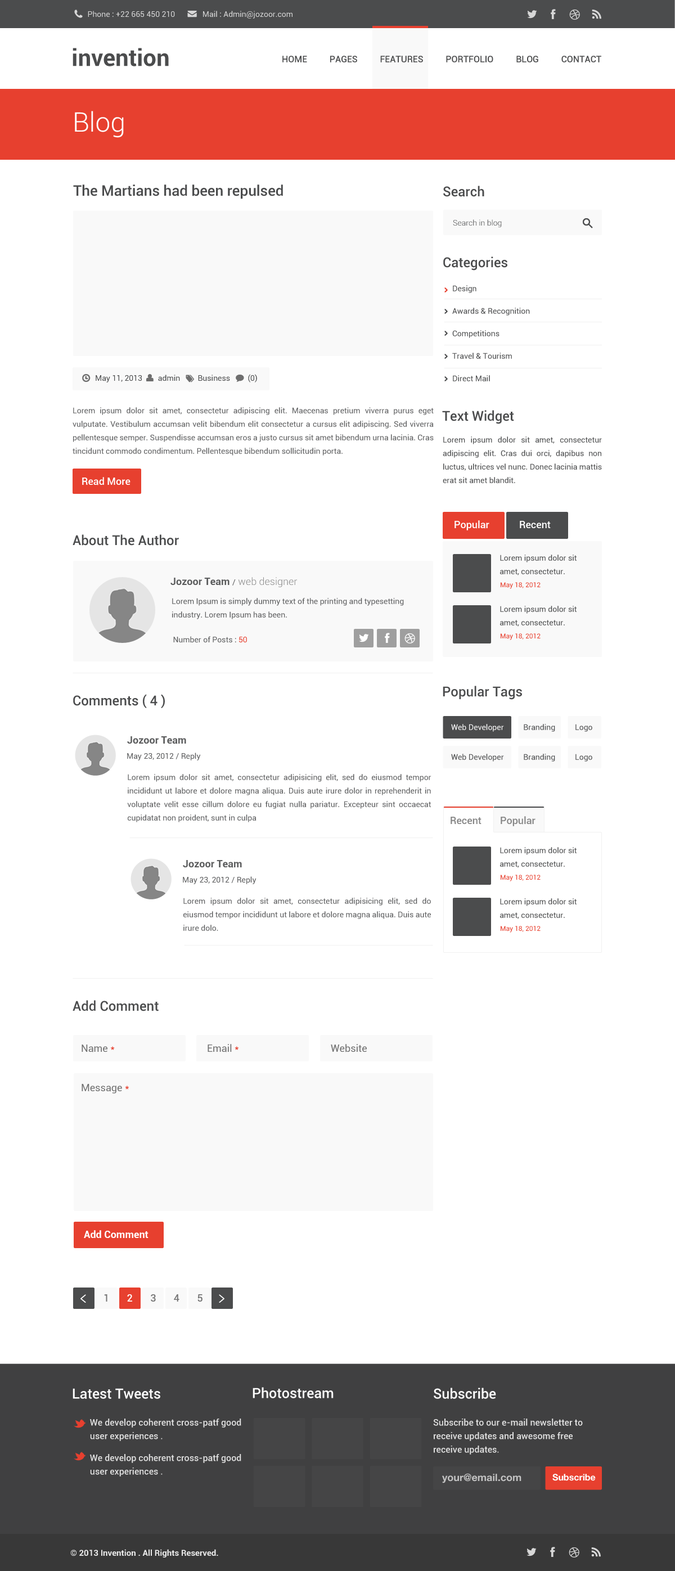
<style>
.page{position:relative;width:675px;height:1571px;background:#ffffff}
.page>*{position:absolute;margin:0}
.t1{font:7.9px "Roboto-Regular";color:#d7d7d7}
.t2{font:9px "Roboto-Medium";color:#4b4c4d}
.t3{font:27px "Roboto-Light";color:#ffffff}
.t4{font:14.6px "Roboto-Medium";color:#4b4c4d}
.t5{font:13.5px "Roboto-Medium";color:#4b4c4d}
.t6{font:7.9px "Roboto-Light";color:#4b4c4d}
.t7{font:7.9px/22.5px "Roboto-Regular";color:#4b4c4d}
.t8{font:7.9px "Roboto-Regular";color:#4b4c4d}
.t9{font:7.9px/13.5px "Roboto-Regular";color:#5c5d5e}
.t10{font:7.9px/13.5px "Roboto-Regular";color:#4b4c4d}
.t11{font:10.1px "Roboto-Medium";color:#ffffff}
.t12{font:10.1px "Roboto-Light";color:#8a8a8a}
.t13{font:10.1px "Roboto-Bold";color:#5c5d5e}
.t14{font:7.9px "Roboto-Regular";color:#5c5d5e}
.t15{font:6.8px "Roboto-Regular";color:#e7402f}
.t16{font:7.9px "Roboto-Regular";color:#e7402f}
.t17{font:10.1px "Roboto-Medium";color:#868686}
.t18{font:10.1px "Roboto-Medium";color:#878787}
.t19{font:10.1px "Roboto-Regular";color:#717171}
.t20{font:10.1px "Roboto-Regular";color:#e7402f}
.t21{font:10.1px "Roboto-Bold";color:#ffffff}
.t22{font:10.1px "Roboto-Medium";color:#757575}
.t23{font:9px/13.5px "Roboto-Medium";color:#e1e1e1}
.t24{font:14.1px/16.1px "Roboto-Medium";color:#ffffff}
.t25{font:14.1px "Roboto-Medium";color:#ffffff}
.t26{font:10.1px "HelveticaNeue-Bold";color:#c2c2c2}
.t27{font:9px "HelveticaNeue-Bold";color:#ffffff}
.t28{font:8.4px "Roboto-Bold";color:#eaeaea}
</style>
<div class="page">
<p class="t1" style="left:88px;top:11px;width:204px;height:8px">Phone : +22 665 450 210              Mail : Admin@jozoor.com</p>
<p class="t2" style="left:282px;top:56px;width:319px;height:6px">HOME          PAGES          FEATURES          PORTFOLIO          BLOG          CONTACT</p>
<p class="t3" style="left:75px;top:111px;width:49px;height:27px">Blog</p>
<p class="t4" style="left:73px;top:184px;width:210px;height:15px">The Martians had been repulsed</p>
<p class="t5" style="left:443px;top:186px;width:41px;height:11px">Search</p>
<p class="t6" style="left:453px;top:219px;width:49px;height:8px">Search in blog</p>
<p class="t5" style="left:443px;top:256px;width:64px;height:15px">Categories</p>
<p class="t7" style="left:452px;top:285px;width:78px;height:96px">Design<br>Awards &amp; Recognition<br>Competitions<br>Travel &amp; Tourism<br>Direct Mail</p>
<p class="t8" style="left:96px;top:374px;width:161px;height:8px">May 11, 2013        admin         Business         (0)</p>
<p class="t9" style="left:73px;top:407px;width:361px;height:49px;text-align:justify">Lorem ipsum dolor sit amet, consectetur adipiscing elit. Maecenas pretium viverra purus eget vulputate. Vestibulum accumsan velit bibendum elit consectetur a cursus elit adipiscing. Sed viverra pellentesque semper. Suspendisse accumsan eros a justo cursus sit amet bibendum urna lacinia. Cras tincidunt commodo condimentum. Pellentesque bibendum sollicitudin porta.</p>
<p class="t5" style="left:442px;top:410px;width:72px;height:14px">Text Widget</p>
<p class="t10" style="left:443px;top:436px;width:159px;height:47px;text-align:justify">Lorem ipsum dolor sit amet, consectetur adipiscing elit. Cras dui orci, dapibus non luctus, ultrices vel nunc. Donec lacinia mattis erat sit amet blandit.</p>
<p class="t11" style="left:82px;top:477px;width:48px;height:8px">Read More</p>
<p class="t11" style="left:454px;top:520px;width:35px;height:10px">Popular</p>
<p class="t11" style="left:520px;top:521px;width:31px;height:7px">Recent</p>
<p class="t5" style="left:73px;top:534px;width:106px;height:12px">About The Author</p>
<p class="t10" style="left:500px;top:555px;width:77px;height:20px">Lorem ipsum dolor sit amet, consectetur.</p>
<p class="t12" style="left:170px;top:577px;width:127px;height:10px"><span class="t13">Jozoor Team </span><span class="t14">/ </span>web designer</p>
<p class="t15" style="left:501px;top:582px;width:40px;height:7px">May 18, 2012</p>
<p class="t9" style="left:172px;top:598px;width:232px;height:21px">Lorem Ipsum is simply dummy text of the printing and typesetting industry. Lorem Ipsum has been.</p>
<p class="t10" style="left:500px;top:606px;width:77px;height:21px">Lorem ipsum dolor sit amet, consectetur.</p>
<p class="t14" style="left:173px;top:636px;width:74px;height:7px">Number of Posts : <span class="t16">50</span></p>
<p class="t15" style="left:501px;top:633px;width:40px;height:7px">May 18, 2012</p>
<p class="t5" style="left:443px;top:686px;width:79px;height:14px">Popular Tags</p>
<p class="t5" style="left:73px;top:694px;width:92px;height:14px">Comments ( 4 )</p>
<p class="t13" style="left:127px;top:736px;width:59px;height:8px">Jozoor Team</p>
<p class="t14" style="left:127px;top:753px;width:74px;height:7px">May 23, 2012 / Reply</p>
<p class="t8" style="left:451px;top:754px;width:141px;height:8px">Web Developer          Branding          Logo</p>
<p class="t9" style="left:127px;top:774px;width:304px;height:48px;text-align:justify">Lorem ipsum dolor sit amet, consectetur adipisicing elit, sed do eiusmod tempor incididunt ut labore et dolore magna aliqua. Duis aute irure dolor in reprehenderit in voluptate velit esse cillum dolore eu fugiat nulla pariatur. Excepteur sint occaecat cupidatat non proident, sunt in culpa</p>
<p class="t17" style="left:451px;top:817px;width:31px;height:7px">Recent</p>
<p class="t18" style="left:501px;top:816px;width:35px;height:10px">Popular</p>
<p class="t10" style="left:500px;top:847px;width:77px;height:21px">Lorem ipsum dolor sit amet, consectetur.</p>
<p class="t13" style="left:183px;top:860px;width:59px;height:8px">Jozoor Team</p>
<p class="t14" style="left:183px;top:876px;width:73px;height:8px">May 23, 2012 / Reply</p>
<p class="t15" style="left:501px;top:875px;width:40px;height:6px">May 18, 2012</p>
<p class="t9" style="left:183px;top:898px;width:248px;height:33px;text-align:justify">Lorem ipsum dolor sit amet, consectetur adipisicing elit, sed do eiusmod tempor incididunt ut labore et dolore magna aliqua. Duis aute irure dolo.</p>
<p class="t10" style="left:500px;top:898px;width:77px;height:21px">Lorem ipsum dolor sit amet, consectetur.</p>
<p class="t15" style="left:501px;top:926px;width:40px;height:7px">May 18, 2012</p>
<p class="t5" style="left:73px;top:1000px;width:86px;height:11px">Add Comment</p>
<p class="t19" style="left:82px;top:1045px;width:33px;height:7px">Name <span class="t20">*</span></p>
<p class="t19" style="left:208px;top:1044px;width:30px;height:8px">Email <span class="t20">*</span></p>
<p class="t19" style="left:331px;top:1044px;width:36px;height:8px">Website</p>
<p class="t19" style="left:82px;top:1084px;width:47px;height:10px">Message <span class="t20">*</span></p>
<p class="t21" style="left:84px;top:1230px;width:64px;height:8px">Add Comment</p>
<p class="t22" style="left:104px;top:1294px;width:98px;height:8px">1       <span class="t11">2       </span>3       4       5</p>
<p class="t23" style="left:73px;top:1388px;width:168px;height:89px"><span class="t24">Latest Tweets<br><br><br><br>        </span>We develop coherent cross-patf good<br>        user experiences .<br><br>        We develop coherent cross-patf good<br>        user experiences .</p>
<p class="t25" style="left:253px;top:1387px;width:81px;height:11px">Photostream</p>
<p class="t23" style="left:433px;top:1388px;width:150px;height:67px"><span class="t24">Subscribe<br><br><br><br></span>Subscribe to our e-mail newsletter to<br>receive updates and awesome free<br>receive updates.</p>
<p class="t26" style="left:442px;top:1473px;width:79px;height:10px">your@email.com</p>
<p class="t27" style="left:552px;top:1474px;width:44px;height:7px">Subscribe</p>
<p class="t28" style="left:70px;top:1549px;width:148px;height:9px">© 2013 Invention . All Rights Reserved.</p>
</div>
